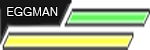
<style>
.page{position:relative;width:150px;height:50px}
.page>*{position:absolute;margin:0}
.t1{font:12px "Gulim";color:#ffffff}
</style>
<div class="page">
<p class="t1" style="left:7px;top:7px;width:51px;height:9px">EGGMAN</p>
</div>
